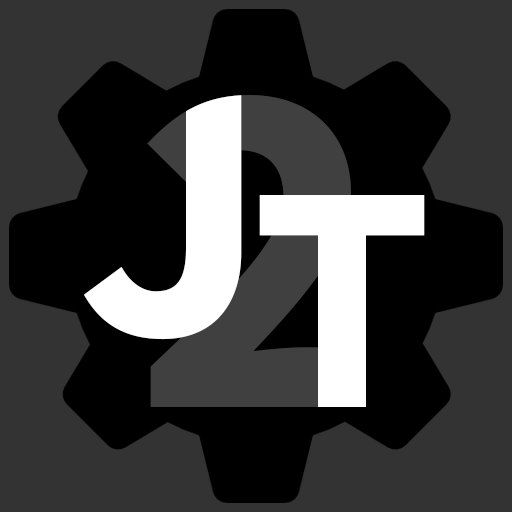
<style>
.page{position:relative;width:512px;height:512px;background:#333333}
.page>*{position:absolute;margin:0}
.t1{font:375px "SourceSansPro-Bold";color:#ffffff}
.t2{font:325px "SourceSansPro-Bold";color:#ffffff}
</style>
<div class="page">
<p class="t1" style="left:84px;top:90px;width:158px;height:250px">J</p>
<p class="t2" style="left:259px;top:195px;width:166px;height:212px">T</p>
</div>
